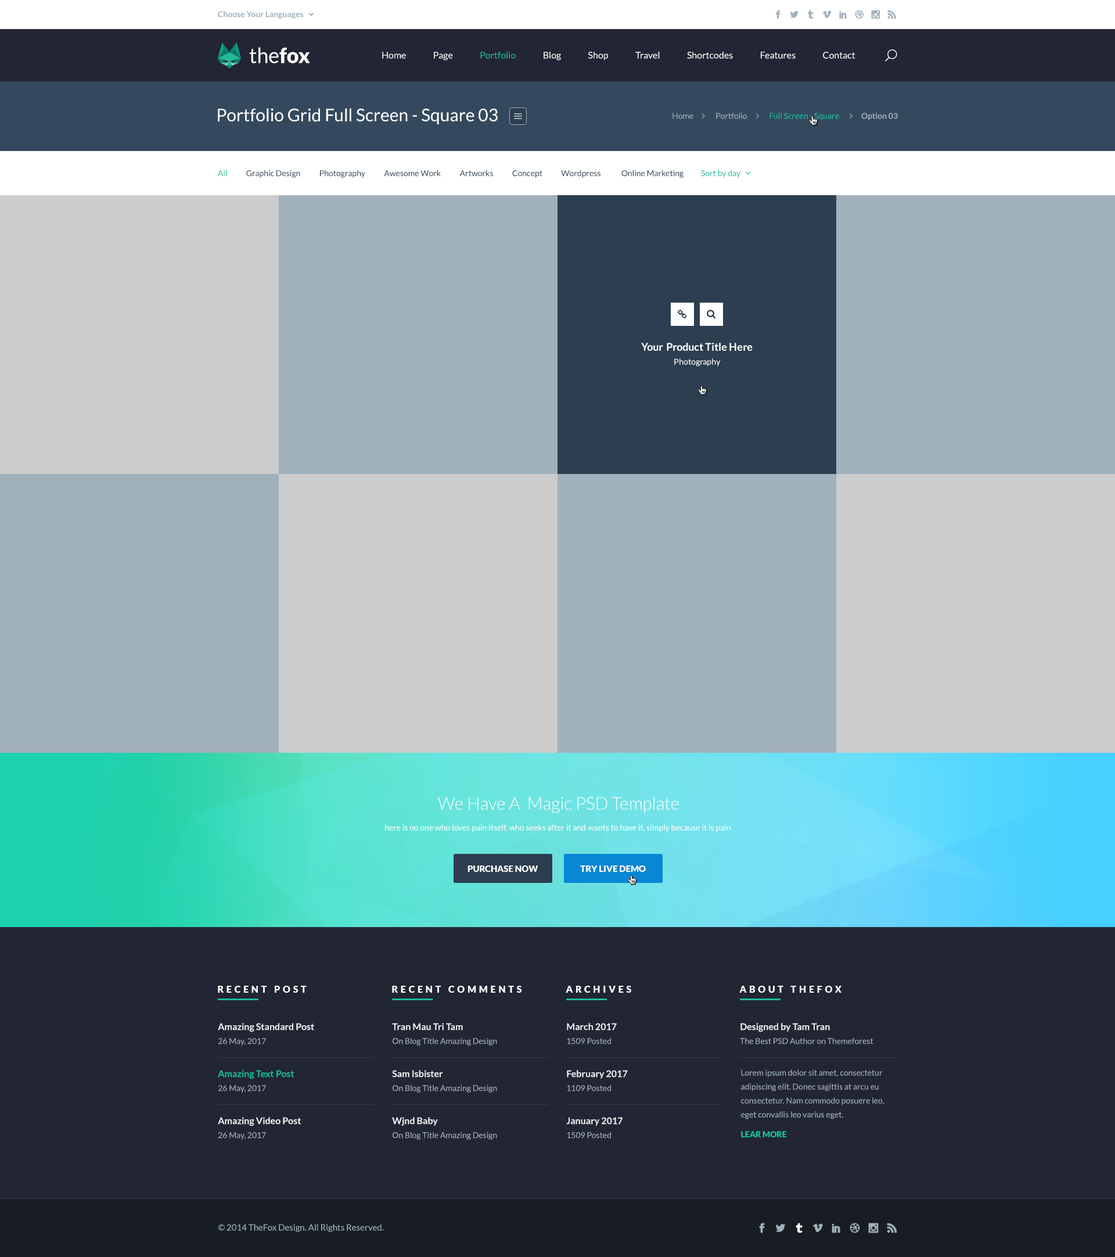
<style>
.page{position:relative;width:1115px;height:1257px;background:#222533}
.page>*{position:absolute;margin:0}
.t1{font:8.1px "Lato-Bold";color:#a1b1bc}
.t2{font:20.9px "Lato-Regular";color:#ffffff}
.t3{font:20.9px "Lato-Black";color:#ffffff}
.t4{font:9.3px "Lato-Regular";color:#ffffff}
.t5{font:9.3px "Lato-Regular";color:#1abc9c}
.t6{font:17.4px "Lato-Regular";color:#ffffff}
.t7{font:8.1px "Lato-Regular";color:#a1b1bc}
.t8{font:8.1px "Lato-Regular";color:#1abc9c}
.t9{font:8.1px "Lato-Regular";color:#2c3e50}
.t10{font:10.5px/13.9px "Lato-Bold";color:#ffffff}
.t11{font:8.1px/13.9px "Lato-Regular";color:#ffffff}
.t12{font:17.4px "Lato-Light";color:#ffffff}
.t13{font:8.1px "Lato-Regular";color:#ffffff}
.t14{font:8.7px "Lato-Black";color:#ffffff;text-transform:uppercase}
.t15{font:9.3px "Lato-Black";letter-spacing:0.3em;color:#ffffff}
.t16{font:9.3px/13.9px "Lato-Bold";color:#ecf0f1}
.t17{font:8.1px/13.9px "Lato-Regular";color:#a1b1bc}
.t18{font:9.3px/13.9px "Lato-Bold";color:#1abc9c}
.t19{font:8.1px "Lato-Black";color:#1abc9c}
.t20{font:8.7px "Lato-Regular";color:#a1b1bc}
</style>
<div class="page">
<p class="t1" style="left:218px;top:11px;width:86px;height:8px">Choose Your Languages</p>
<p class="t2" style="left:249px;top:47px;width:61px;height:16px">the<span class="t3">fox</span></p>
<p class="t4" style="left:382px;top:52px;width:473px;height:8px">Home               Page               <span class="t5">Portfolio</span>               Blog               Shop               Travel               Shortcodes               Features               Contact</p>
<p class="t6" style="left:218px;top:108px;width:280px;height:16px">Portfolio Grid Full Screen - Square 03</p>
<p class="t7" style="left:672px;top:113px;width:226px;height:7px">Home              Portfolio              <span class="t8">Full Screen - Square              </span><span class="t1">Option 03</span></p>
<p class="t9" style="left:217px;top:170px;width:523px;height:8px"><span class="t8">All</span>            Graphic Design            Photography            Awesome Work            Artworks            Concept            Wordpress             Online Marketing           <span class="t8">Sort by day</span></p>
<p class="t10" style="left:641px;top:343px;width:112px;height:23px;text-align:center">Your  Product Title Here<br><span class="t11">Photography</span></p>
<p class="t12" style="left:438px;top:797px;width:241px;height:16px">We Have A  Magic PSD Template</p>
<p class="t13" style="left:385px;top:824px;width:345px;height:8px">here is no one who loves pain itself, who seeks after it and wants to have it, simply because it is pain</p>
<p class="t14" style="left:467px;top:865px;width:71px;height:7px">PURCHASE NOW</p>
<p class="t14" style="left:580px;top:865px;width:66px;height:7px">TRY LIVE DEMO</p>
<p class="t15" style="left:218px;top:985px;width:89px;height:7px">RECENT POST</p>
<p class="t15" style="left:392px;top:985px;width:129px;height:7px">RECENT COMMENTS</p>
<p class="t15" style="left:566px;top:985px;width:65px;height:7px">ARCHIVES</p>
<p class="t15" style="left:739px;top:985px;width:102px;height:7px">ABOUT THEFOX</p>
<p class="t16" style="left:218px;top:1023px;width:96px;height:22px">Amazing Standard Post<br><span class="t17">26 May, 2017</span></p>
<p class="t17" style="left:392px;top:1023px;width:105px;height:22px"><span class="t16">Tran Mau Tri Tam<br></span>On Blog Title Amazing Design</p>
<p class="t17" style="left:567px;top:1023px;width:50px;height:21px"><span class="t16">March 2017<br></span>1509 Posted</p>
<p class="t17" style="left:740px;top:1023px;width:133px;height:21px"><span class="t16">Designed by Tam Tran<br></span>The Best PSD Author on Themeforest</p>
<p class="t18" style="left:218px;top:1070px;width:76px;height:22px">Amazing Text Post<br><span class="t17">26 May, 2017</span></p>
<p class="t17" style="left:392px;top:1070px;width:105px;height:22px"><span class="t16">Sam Isbister<br></span>On Blog Title Amazing Design</p>
<p class="t16" style="left:567px;top:1070px;width:61px;height:21px">February 2017<br><span class="t17">1109 Posted</span></p>
<p class="t17" style="left:741px;top:1069px;width:143px;height:50px">Lorem ipsum dolor sit amet, consectetur adipiscing elit. Donec sagittis at arcu eu consectetur. Nam commodo posuere leo, eget convallis leo varius eget.</p>
<p class="t16" style="left:218px;top:1117px;width:83px;height:22px">Amazing Video Post<br><span class="t17">26 May, 2017</span></p>
<p class="t17" style="left:392px;top:1117px;width:105px;height:22px"><span class="t16">Wjnd Baby<br></span>On Blog Title Amazing Design</p>
<p class="t16" style="left:566px;top:1117px;width:56px;height:21px">January 2017<br><span class="t17">1509 Posted</span></p>
<p class="t19" style="left:741px;top:1131px;width:46px;height:6px">LEAR MORE</p>
<p class="t20" style="left:218px;top:1223px;width:166px;height:9px">© 2014 TheFox Design. All Rights Reserved.</p>
</div>
